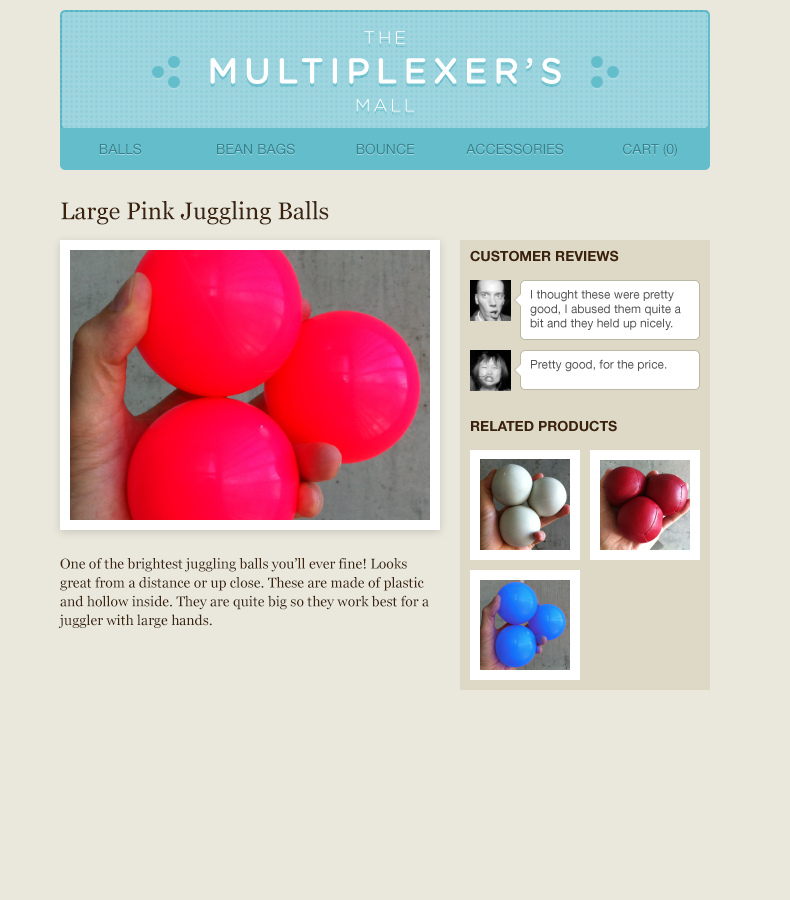
<style>
.page{position:relative;width:790px;height:900px;background:#eae8dc}
.page>*{position:absolute;margin:0}
.t1{font:14px "HelveticaNeueLTStd-Roman";color:#33838f}
.t2{font:24px "Georgia";color:#3a220d}
.t3{font:14px "HelveticaNeueLTStd-Bd";color:#3a220d;text-transform:uppercase}
.t4{font:12px "HelveticaNeueLTStd-Roman";color:#555555}
.t5{font:14px/18.8px "Georgia";color:#3a220d}
</style>
<div class="page">
<p class="t1" style="left:99px;top:143px;width:43px;height:12px">BALLS</p>
<p class="t1" style="left:217px;top:143px;width:78px;height:12px">BEAN BAGS</p>
<p class="t1" style="left:356px;top:143px;width:58px;height:12px">BOUNCE</p>
<p class="t1" style="left:466px;top:143px;width:98px;height:12px">ACCESSORIES</p>
<p class="t1" style="left:623px;top:143px;width:54px;height:14px">CART (0)</p>
<p class="t2" style="left:61px;top:201px;width:268px;height:24px">Large Pink Juggling Balls</p>
<p class="t3" style="left:470px;top:250px;width:149px;height:12px">Customer Reviews</p>
<p class="t4" style="left:530px;top:290px;width:151px;height:40px">I thought these were pretty good, I abused them quite a bit and they held up nicely.</p>
<p class="t4" style="left:531px;top:359px;width:136px;height:13px">Pretty good, for the price.</p>
<p class="t3" style="left:471px;top:420px;width:146px;height:12px">Related Products</p>
<p class="t5" style="left:58px;top:558px;width:371px;height:70px">One of the brightest juggling balls you’ll ever fine! Looks great from a distance or up close. These are made of plastic and hollow inside. They are quite big so they work best for a juggler with large hands.</p>
</div>
